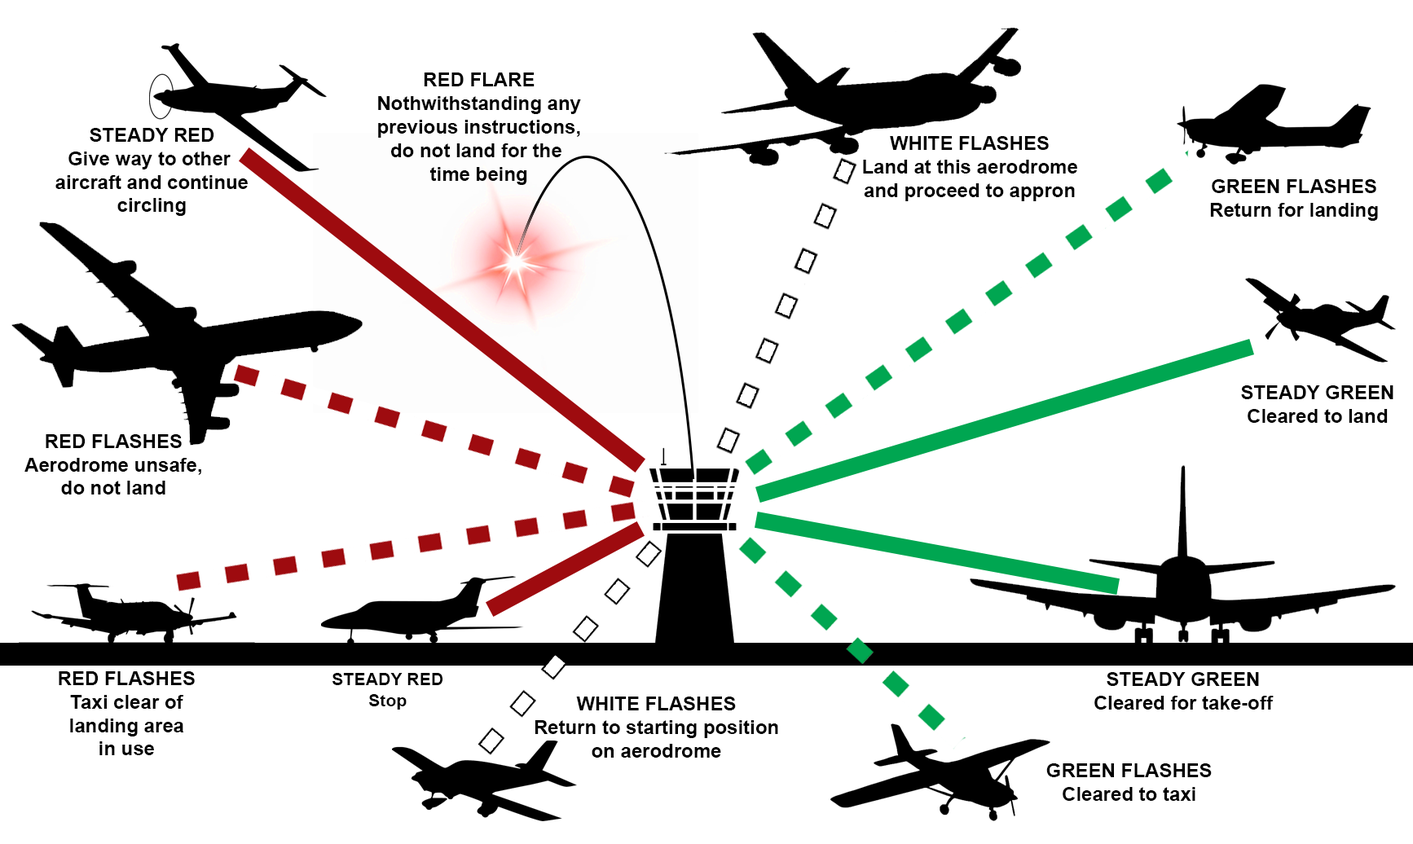
<style>
.page{position:relative;width:1413px;height:844px;background:#ffffff}
.page>*{position:absolute;margin:0}
.t1{font:19.6px "Arial-BoldMT";color:#000000}
.t2{font:17.4px "Arial-BoldMT";color:#000000}
</style>
<div class="page">
<p class="t1" style="left:378px;top:73px;width:203px;height:112px;text-align:center">RED FLARE<br>Nothwithstanding any<br>previous instructions,<br>do not land for the <br>time being</p>
<p class="t1" style="left:55px;top:128px;width:193px;height:88px;text-align:center">STEADY RED<br>Give way to other <br>aircraft and continue<br>circling</p>
<p class="t1" style="left:863px;top:136px;width:214px;height:65px;text-align:center">WHITE FLASHES<br>Land at this aerodrome<br>and proceed to appron</p>
<p class="t1" style="left:1210px;top:179px;width:168px;height:42px;text-align:center">GREEN FLASHES<br>Return for landing</p>
<p class="t1" style="left:1241px;top:385px;width:152px;height:38px;text-align:center">STEADY GREEN<br>Cleared to land</p>
<p class="t1" style="left:24px;top:434px;width:177px;height:61px;text-align:center">RED FLASHES<br>Aerodrome unsafe,<br>do not land</p>
<p class="t1" style="left:59px;top:671px;width:136px;height:84px;text-align:center">RED FLASHES<br>Taxi clear of<br>landing area<br>in use</p>
<p class="t2" style="left:332px;top:673px;width:110px;height:37px;text-align:center">STEADY RED<br>Stop</p>
<p class="t1" style="left:1094px;top:672px;width:179px;height:38px;text-align:center">STEADY GREEN<br>Cleared for take-off</p>
<p class="t1" style="left:534px;top:697px;width:244px;height:61px;text-align:center">WHITE FLASHES<br>Return to starting position<br>on aerodrome</p>
<p class="t1" style="left:1046px;top:763px;width:166px;height:38px;text-align:center">GREEN FLASHES<br>Cleared to taxi</p>
</div>
